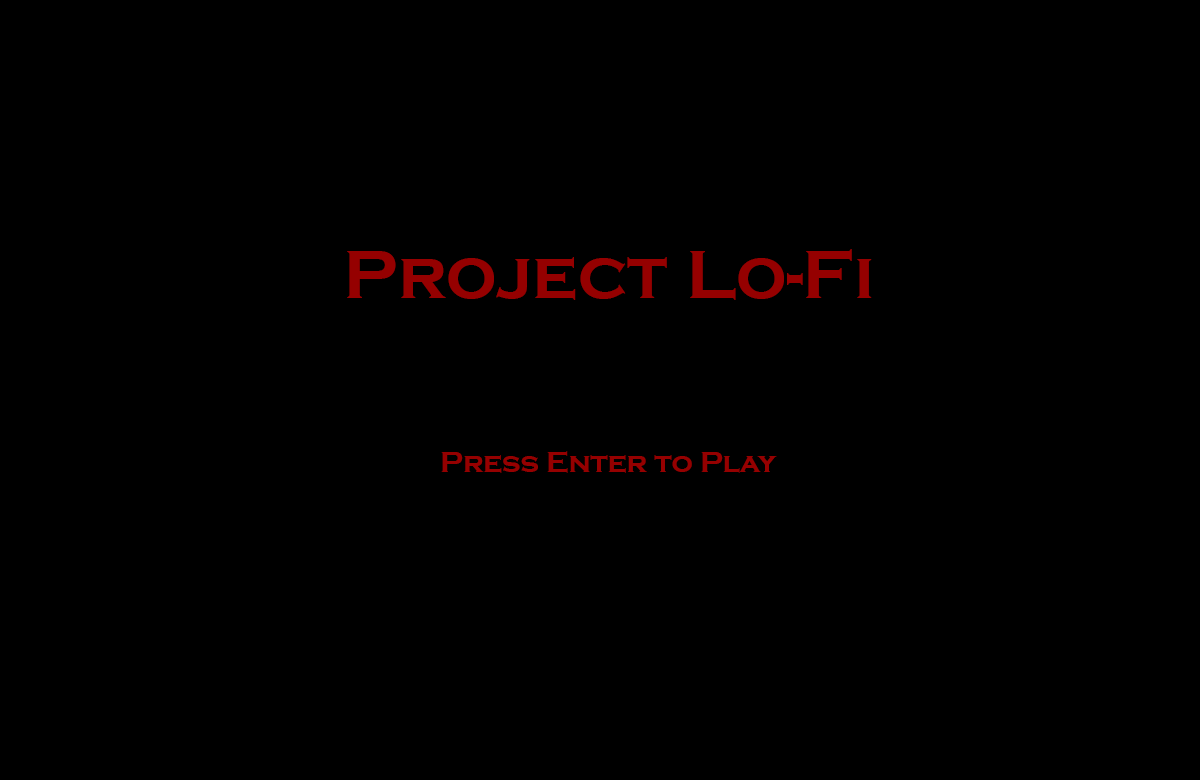
<style>
.page{position:relative;width:1200px;height:780px;background:#000000}
.page>*{position:absolute;margin:0}
.t1{font:71.1px "CopperplateGothic-Bold";color:#950000}
.t2{font:29.6px "CopperplateGothic-Bold";color:#950000}
</style>
<div class="page">
<p class="t1" style="left:347px;top:249px;width:525px;height:51px">Project Lo-Fi</p>
<p class="t2" style="left:441px;top:451px;width:336px;height:22px">Press Enter to Play</p>
</div>
